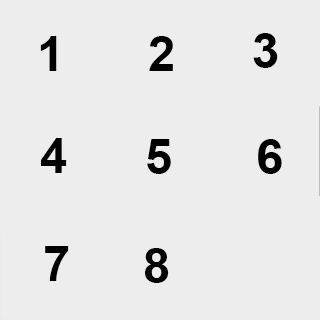
<style>
.page{position:relative;width:320px;height:320px;background:#ededed}
.page>*{position:absolute;margin:0}
.t1{font:48.9px "Arial-BoldMT";color:#000000}
.t2{font:48.7px "Arial-BoldMT";color:#000000}
.t3{font:48.8px "Arial-BoldMT";color:#000000}
</style>
<div class="page">
<p class="t1" style="left:40px;top:36px;width:17px;height:35px">1</p>
<p class="t1" style="left:149px;top:36px;width:24px;height:35px">2</p>
<p class="t1" style="left:253px;top:33px;width:25px;height:35px">3</p>
<p class="t2" style="left:41px;top:138px;width:26px;height:35px">4</p>
<p class="t3" style="left:147px;top:139px;width:24px;height:35px">5</p>
<p class="t3" style="left:258px;top:139px;width:24px;height:35px">6</p>
<p class="t2" style="left:45px;top:246px;width:24px;height:35px">7</p>
<p class="t3" style="left:145px;top:248px;width:24px;height:35px">8</p>
</div>
